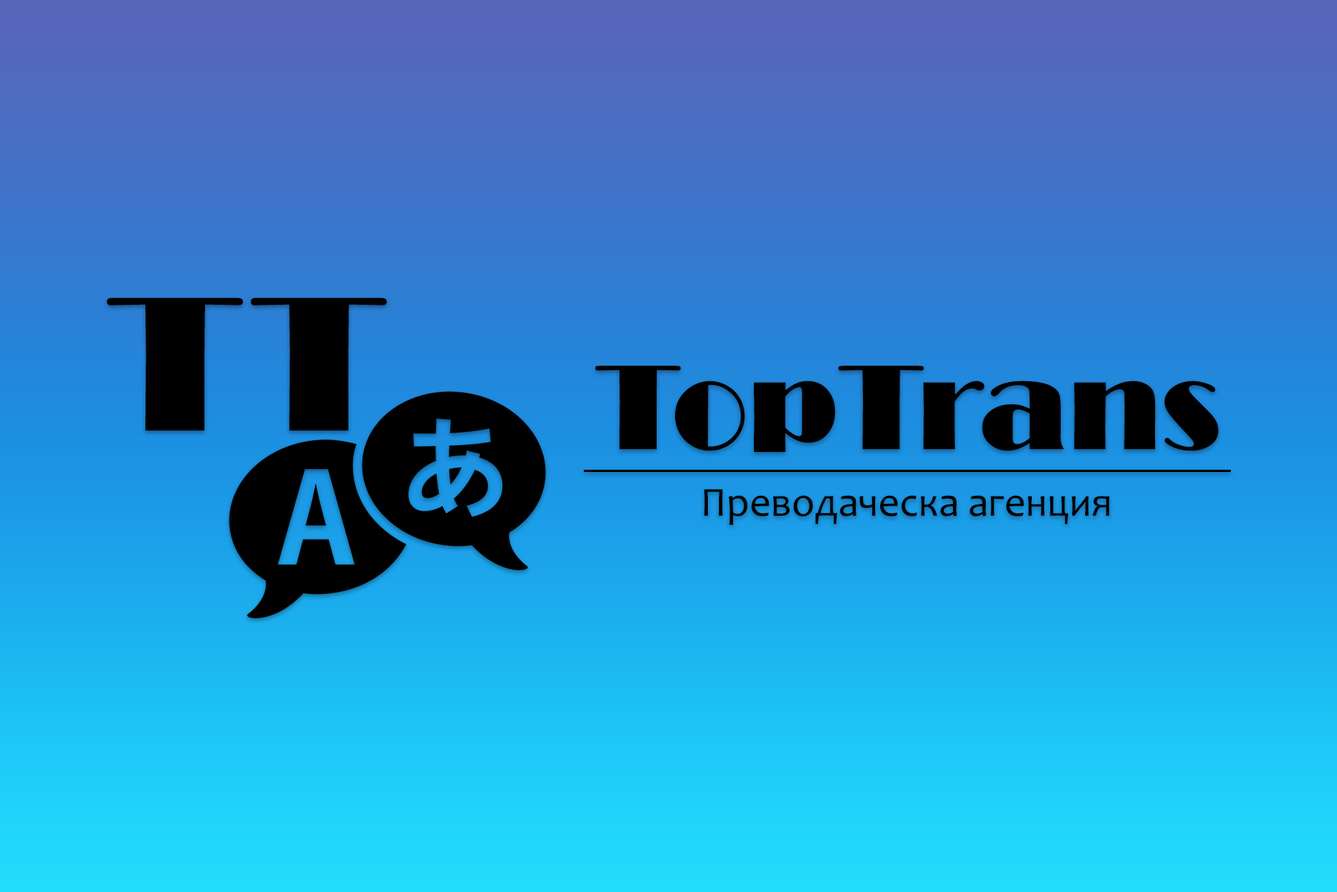
<style>
.page{position:relative;width:1337px;height:892px}
.page>*{position:absolute;margin:0}
.t1{font:198.5px "Broadway";color:#000000}
.t2{font:124.8px "Broadway";color:#000000}
.t3{font:41.6px "Candara";color:#000000}
</style>
<div class="page">
<p class="t1" style="left:107px;top:297px;width:280px;height:134px">T T</p>
<p class="t2" style="left:595px;top:366px;width:624px;height:86px">TopTrans</p>
<p class="t3" style="left:704px;top:489px;width:406px;height:36px">Преводаческа агенция</p>
</div>
